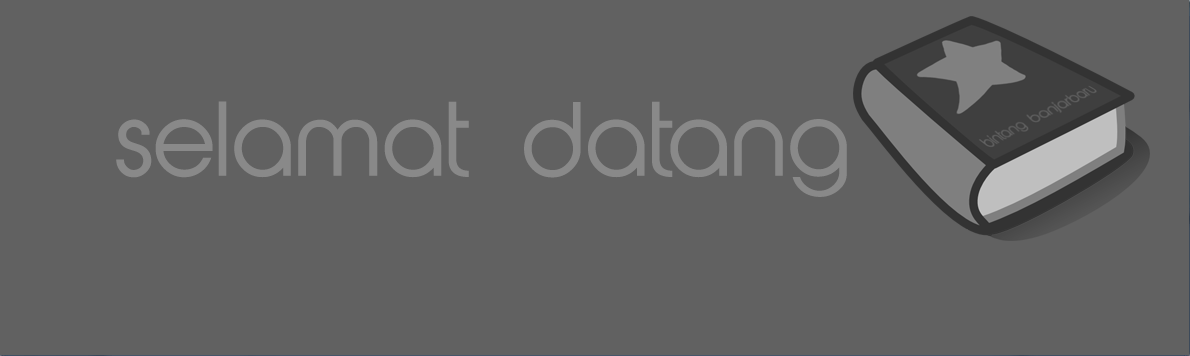
<style>
.page{position:relative;width:1190px;height:356px;background:#616161}
.page>*{position:absolute;margin:0}
.t1{font:96px "AbeatbyKai";color:#898989}
</style>
<div class="page">
<p class="t1" style="left:116px;top:101px;width:731px;height:96px">selamat datang</p>
</div>
